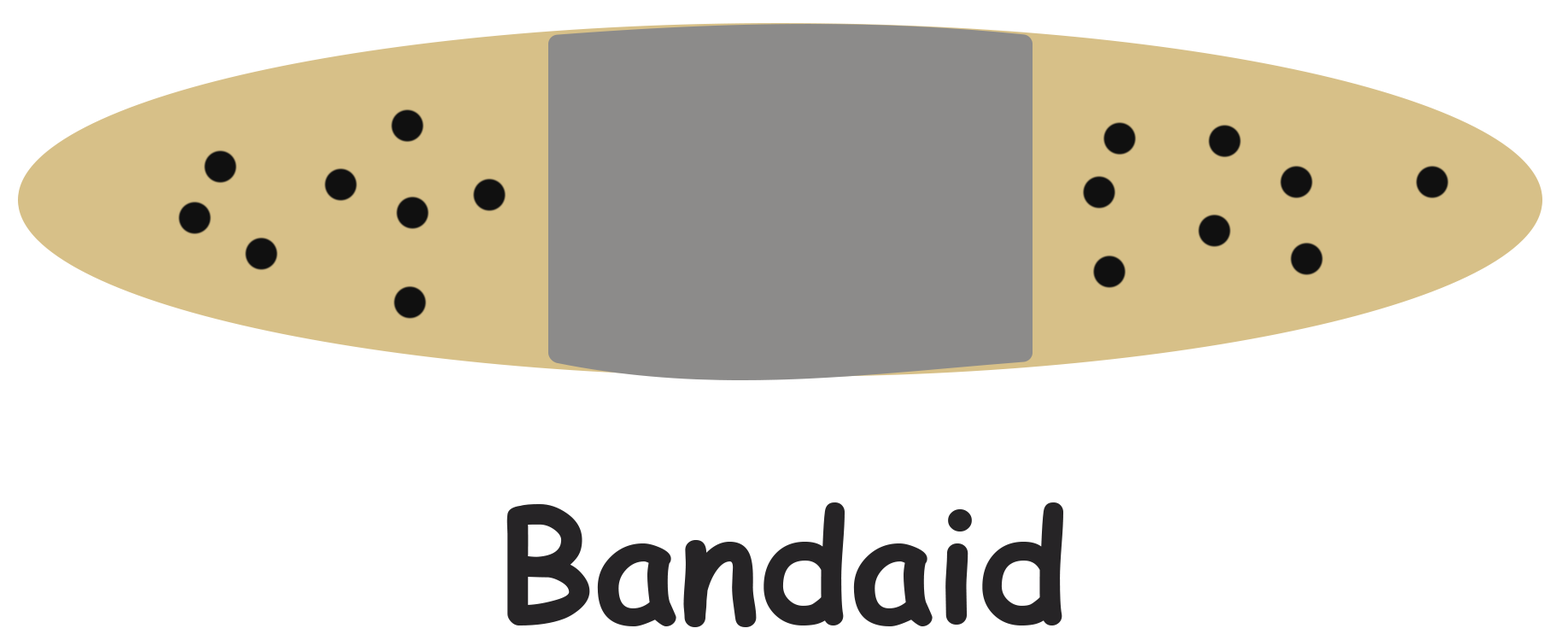
<style>
.page{position:relative;width:1568px;height:640px;background:#ffffff}
.page>*{position:absolute;margin:0}
.t1{font:153.7px "ComicSansMS-Bold";color:#262426}
</style>
<div class="page">
<p class="t1" style="left:506px;top:502px;width:557px;height:125px">Bandaid</p>
</div>
